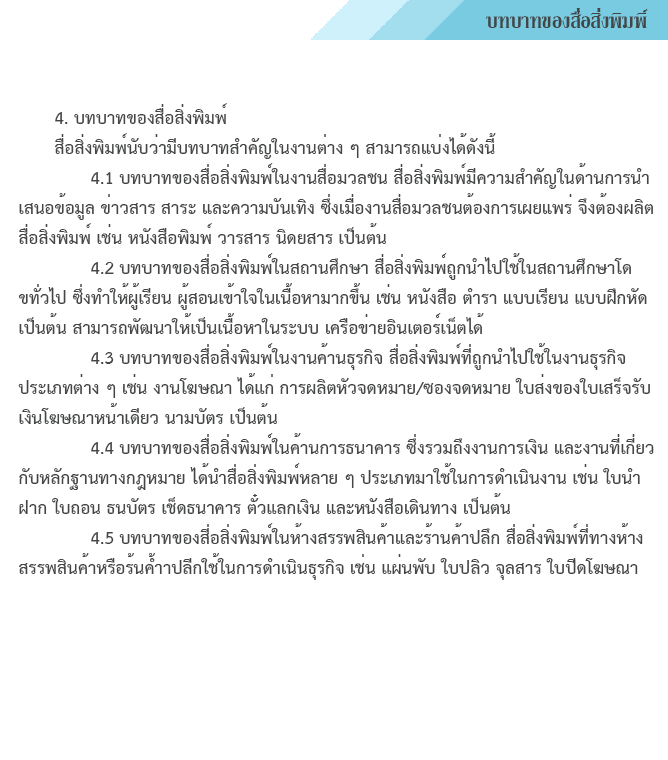
<style>
.page{position:relative;width:668px;height:760px;background:#ffffff}
.page>*{position:absolute;margin:0}
.t1{font:29.2px "KodchiangUPCBold";color:#444545}
.t2{font:25px "THSarabunPSK-Bold";color:#444545}
</style>
<div class="page">
<p class="t1" style="left:485px;top:8px;width:163px;height:20px">บทบาทของสื่อสิ่งพิมพิ์</p>
<p class="t2" style="left:18px;top:103px;width:636px;height:477px">4. บทบาทของสื่อสิ่งพิมพ์<br> สื่อสิ่งพิมพ์นับว่ามีบทบาทสำคัญในงานต่าง ๆ สามารถแบ่งได้ดังนี้<br>  4.1 บทบาทของสื่อสิ่งพิมพ์ในงานสื่อมวลชน สื่อสิ่งพิมพ์มีความสำคัญในด้านการนำเสนอข้อมูล ข่าวสาร สาระ และความบันเทิง ซึ่งเมื่องานสื่อมวลชนต้องการเผยแพร่ จึงต้องผลิตสื่อสิ่งพิมพ์ เช่น หนังสือพิมพ์ วารสาร นิดยสาร เป็นต้น<br>  4.2 บทบาทของสื่อสิ่งพิมพ์ในสถานศึกษา สื่อสิ่งพิมพ์ถูกนำไปใช้ในสถานศึกษาโดขทั่วไป ซึ่งทำให้ผู้เรียน ผู้สอนเข้าใจในเนื้อหามากขึ้น เช่น หนังสือ ตำรา แบบเรียน แบบฝึกหัดเป็นต้น สามารถพัฒนาให้เป็นเนื้อหาในระบบ เครือข่ายอินเตอร์เน็ตได้<br>  4.3 บทบาทของสื่อสิ่งพิมพ์ในงานค้านธุรกิจ สื่อสิ่งพิมพ์ที่ถูกนำไปใช้ในงานธุรกิจประเภทต่าง ๆ เช่น งานโฆษณา ได้แก่ การผลิตหัวจดหมาย/ซองจดหมาย ใบส่งของใบเสร็จรับเงินโฆษณาหน้าเดียว นามบัตร เป็นต้น<br>  4.4 บทบาทของสื่อสิ่งพิมพ์ในค้านการธนาคาร ซึ่งรวมถึงงานการเงิน และงานที่เกี่ยวกับหลักฐานทางกฎหมาย ได้นำสื่อสิ่งพิมพ์หลาย ๆ ประเภทมาใช้ในการดำเนินงาน เช่น ใบนำฝาก ใบถอน ธนบัตร เช็ดธนาคาร ตั๋วแลกเงิน และหนังสือเดินทาง เป็นต้น<br>  4.5 บทบาทของสี่อสิ่งพิมพ์ในห้างสรรพสินค้าและร้านค้าปลึก สื่อสิ่งพิมพ์ที่ทางห้างสรรพสินค้าหรือร้นค้ำาปลีกใช้ในการดำเนินธุรกิจ เช่น แผ่นพับ ใบปลิว จุลสาร ใบปีดโฆษณาต่าง ๆ เป็นต้น</p>
</div>
